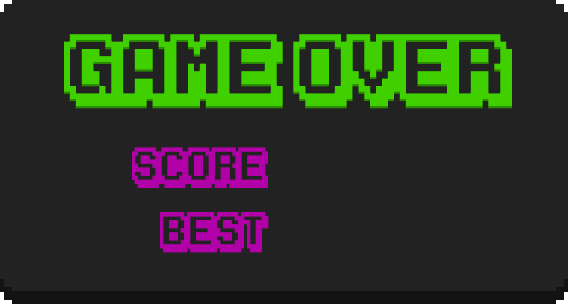
<style>
.page{position:relative;width:568px;height:304px;background:#222222}
.page>*{position:absolute;margin:0}
.t1{font:75.8px "KarmaticArcade";color:#40d000;scale:0.8 1}
.t2{font:41.3px "KarmaticArcade";color:#b200a8;scale:0.73 1}
.t3{font:41px "KarmaticArcade";color:#b200a8;scale:0.75 1}
</style>
<div class="page">
<p class="t1" style="left:64px;top:34px;width:448px;height:75px">GAME OVER</p>
<p class="t2" style="left:132px;top:147px;width:136px;height:41px">SCORE</p>
<p class="t3" style="left:160px;top:212px;width:109px;height:41px">best</p>
</div>
